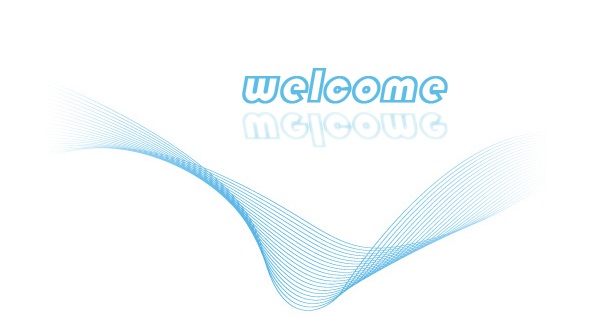
<style>
.page{position:relative;width:615px;height:333px;background:#ffffff}
.page>*{position:absolute;margin:0}
.t1{font:48px "STCaiyun";color:#5cbde7;font-weight:bold;font-style:italic}
.t2{font:48px "STCaiyun";color:#dff2f8;font-weight:bold;font-style:italic}
</style>
<div class="page">
<p class="t1" style="left:242px;top:68px;width:206px;height:36px">welcome</p>
<p class="t2" style="left:242px;top:112px;width:206px;height:36px">welcome</p>
</div>
